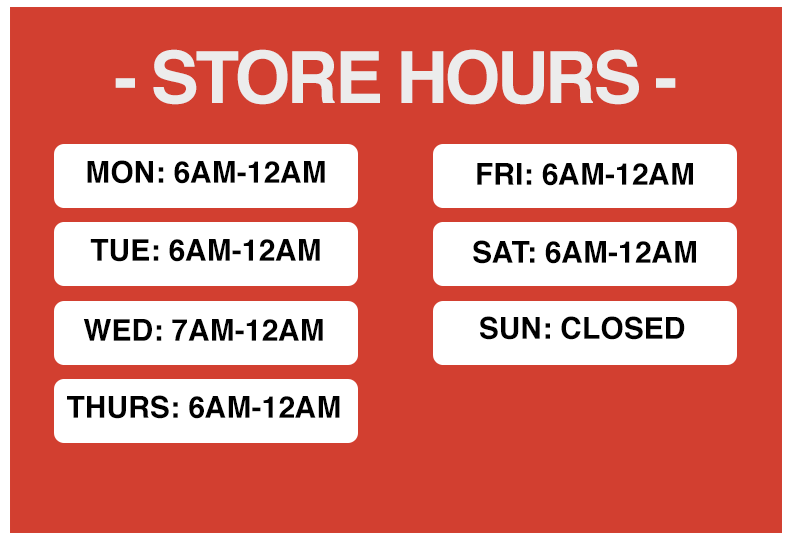
<style>
.page{position:relative;width:792px;height:540px;background:#d23f30}
.page>*{position:absolute;margin:0}
.t1{font:72px "Helvetica-Bold";letter-spacing:-0.05em;color:#ececec}
.t2{font:30px "Helvetica-Bold";color:#000000}
</style>
<div class="page">
<p class="t1" style="left:115px;top:49px;width:561px;height:56px">- STORE HOURS -</p>
<p class="t2" style="left:87px;top:160px;width:238px;height:24px">MON: 6AM-12AM</p>
<p class="t2" style="left:477px;top:163px;width:216px;height:23px">FRI: 6AM-12AM</p>
<p class="t2" style="left:90px;top:239px;width:230px;height:23px">TUE: 6AM-12AM</p>
<p class="t2" style="left:473px;top:240px;width:223px;height:24px">SAT: 6AM-12AM</p>
<p class="t2" style="left:480px;top:316px;width:205px;height:24px">SUN: CLOSED</p>
<p class="t2" style="left:83px;top:319px;width:240px;height:22px">WED: 7AM-12AM</p>
<p class="t2" style="left:67px;top:395px;width:273px;height:24px">THURS: 6AM-12AM</p>
</div>
